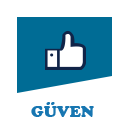
<style>
.page{position:relative;width:130px;height:128px;background:#ffffff}
.page>*{position:absolute;margin:0}
.t1{font:16px "CooperBlack";color:#1776b1}
</style>
<div class="page">
<p class="t1" style="left:31px;top:102px;width:63px;height:15px">GÜVEN</p>
</div>
